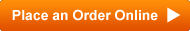
<style>
.page{position:relative;width:190px;height:31px}
.page>*{position:absolute;margin:0}
.t1{font:14px "Arial-BoldMT";color:#ffffff}
</style>
<div class="page">
<p class="t1" style="left:12px;top:9px;width:146px;height:12px">Place an Order Online</p>
</div>
